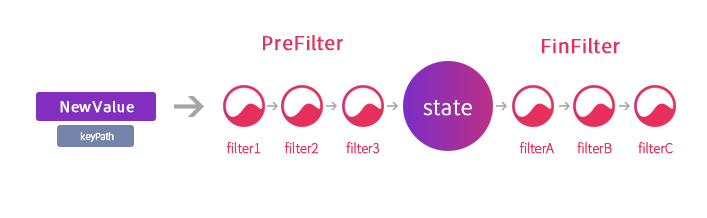
<style>
.page{position:relative;width:707px;height:218px;background:#ffffff}
.page>*{position:absolute;margin:0}
.t1{font:21.3px "CleanProDisp";color:#e6305b;font-weight:bold}
.t2{font:16px "CleanProDisp";color:#ffffff;font-weight:bold}
.t3{font:24px "AdobeClean-Light";color:#ffffff;font-weight:bold}
.t4{font:10.7px "AdobeClean-Light";color:#ffffff;font-weight:bold}
.t5{font:13.3px "SourceHanSansCN-ExtraLight";color:#e6305b;font-weight:bold}
</style>
<div class="page">
<p class="t1" style="left:263px;top:35px;width:80px;height:16px">PreFilter</p>
<p class="t1" style="left:542px;top:38px;width:78px;height:16px">FinFilter</p>
<p class="t2" style="left:60px;top:101px;width:74px;height:12px">NewValue</p>
<p class="t3" style="left:423px;top:100px;width:49px;height:16px">state</p>
<p class="t4" style="left:80px;top:132px;width:34px;height:11px">keyPath</p>
<p class="t5" style="left:226px;top:142px;width:35px;height:12px">filter1</p>
<p class="t5" style="left:284px;top:142px;width:34px;height:12px">filter2</p>
<p class="t5" style="left:346px;top:142px;width:33px;height:12px">filter3</p>
<p class="t5" style="left:519px;top:142px;width:35px;height:12px">filterA</p>
<p class="t5" style="left:577px;top:142px;width:35px;height:12px">filterB</p>
<p class="t5" style="left:638px;top:142px;width:35px;height:12px">filterC</p>
</div>
